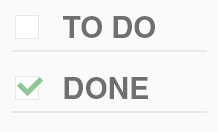
<style>
.page{position:relative;width:218px;height:132px;background:#fafafa}
.page>*{position:absolute;margin:0}
.t1{font:30px "HelveticaLTStd-Bold";color:#6f6f6f}
</style>
<div class="page">
<p class="t1" style="left:63px;top:16px;width:92px;height:22px">TO DO</p>
<p class="t1" style="left:64px;top:77px;width:84px;height:22px">DONE</p>
</div>
